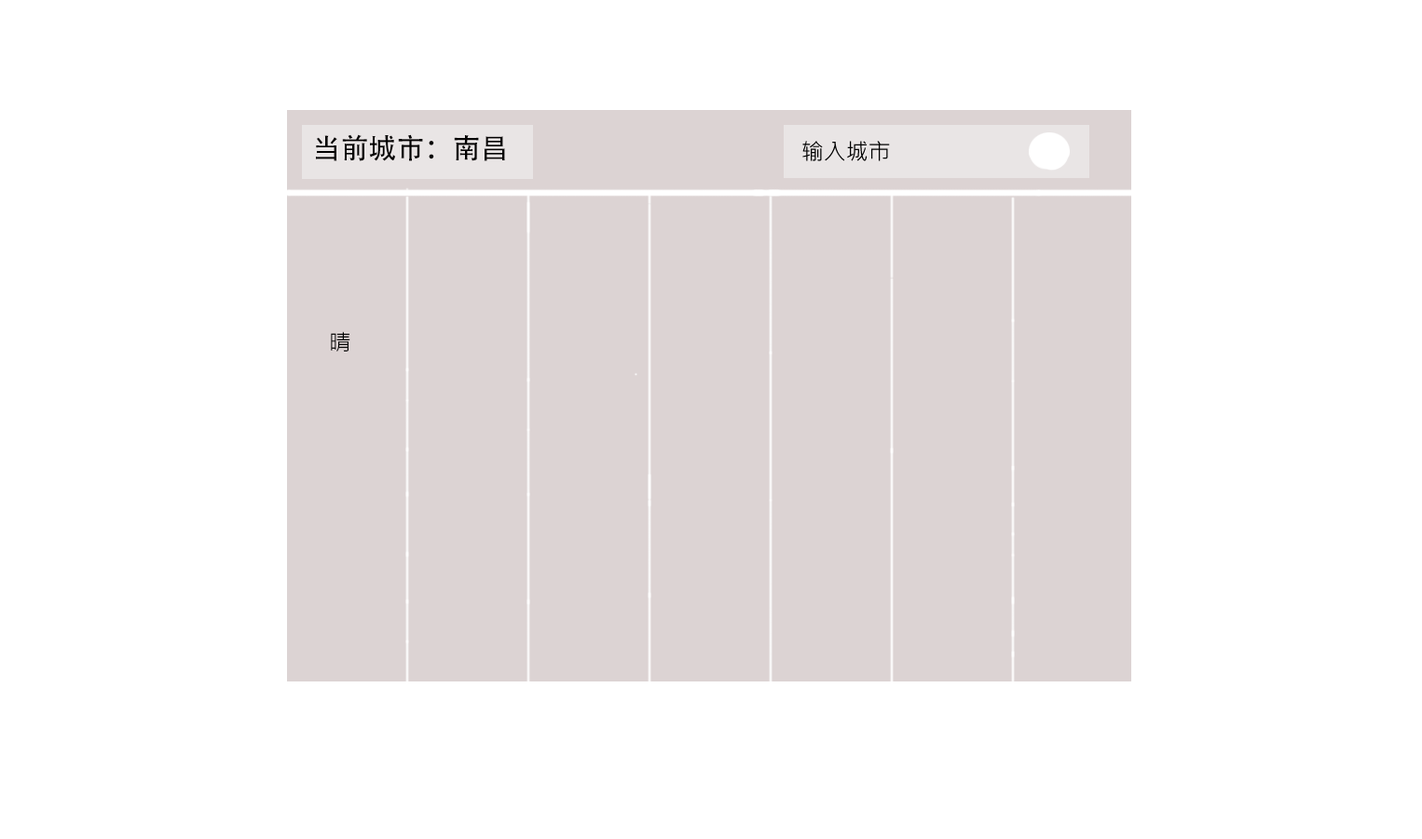
<style>
.page{position:relative;width:1422px;height:839px;background:#ffffff}
.page>*{position:absolute;margin:0}
.t1{font:28px "AdobeHeitiStd-Regular";color:#020000}
.t2{font:22.4px "MicrosoftJhengHeiRegular";color:#000000}
</style>
<div class="page">
<p class="t1" style="left:316px;top:134px;width:189px;height:27px">当前城市：南昌</p>
<p class="t2" style="left:331px;top:332px;width:19px;height:19px">晴</p>
</div>
